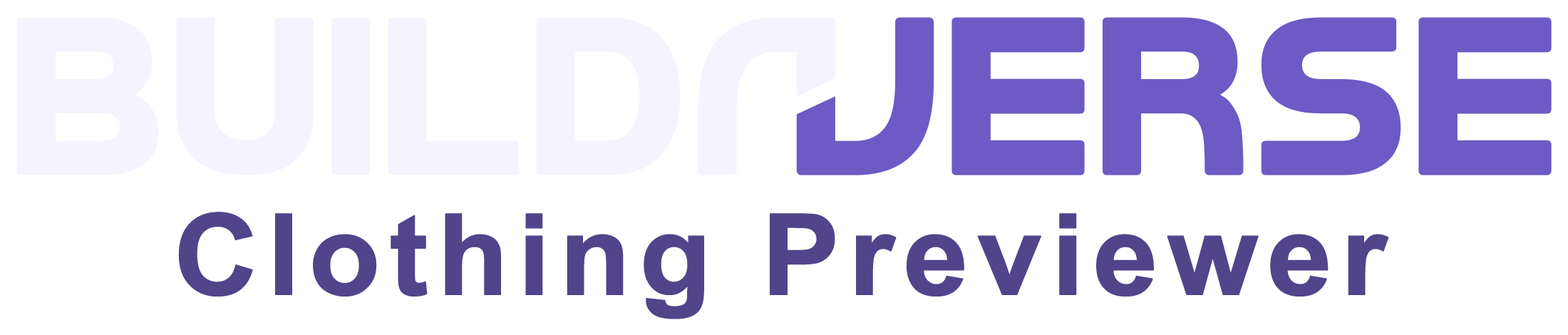
<style>
.page{position:relative;width:1568px;height:335px;background:#ffffff}
.page>*{position:absolute;margin:0}
.t1{font:112.9px "Arial-BoldMT";letter-spacing:0.05em;color:#51448a;font-weight:bold;scale:1.04 1}
</style>
<div class="page">
<p class="t1" style="left:178px;top:212px;width:1211px;height:107px">Clothing Previewer</p>
</div>
